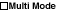
<style>
.page{position:relative;width:80px;height:12px;background:#ffffff}
.page>*{position:absolute;margin:0}
.t1{font:9px "Helvetica-Bold";color:#000000}
</style>
<div class="page">
<p class="t1" style="left:9px;top:2px;width:47px;height:7px">Multi Mode</p>
</div>
